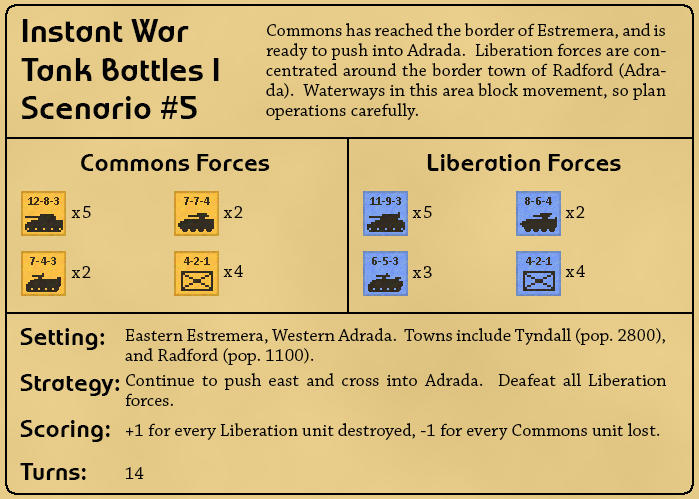
<style>
.page{position:relative;width:699px;height:499px}
.page>*{position:absolute;margin:0}
.t1{font:32px "WorldofWater-Regular";letter-spacing:0.01em;color:#030303}
.t2{font:18px/20px "ChaparralPro-Regular";letter-spacing:0.01em;color:#030303}
.t3{font:24px "WorldofWater-Regular";letter-spacing:0.01em;color:#030303}
.t4{font:18px "ChaparralPro-Regular";letter-spacing:0.1em;color:#030303}
.t5{font:18px "ChaparralPro-Regular";letter-spacing:0.01em;color:#030303}
</style>
<div class="page">
<p class="t1" style="left:21px;top:19px;width:198px;height:100px">Instant War<br>Tank Battles I<br>Scenario #5</p>
<p class="t2" style="left:266px;top:23px;width:400px;height:97px;text-align:justify">Commons has reached the border of Estremera, and is ready to push into Adrada.  Liberation forces are concentrated around the border town of Radford (Adrada).  Waterways in this area block movement, so plan operations carefully.</p>
<p class="t3" style="left:81px;top:154px;width:189px;height:17px">Commons Forces</p>
<p class="t3" style="left:427px;top:154px;width:194px;height:17px">Liberation Forces</p>
<p class="t4" style="left:71px;top:206px;width:20px;height:12px">x5</p>
<p class="t4" style="left:223px;top:206px;width:20px;height:12px">x2</p>
<p class="t4" style="left:412px;top:206px;width:20px;height:12px">x5</p>
<p class="t4" style="left:565px;top:206px;width:20px;height:12px">x2</p>
<p class="t4" style="left:71px;top:266px;width:20px;height:12px">x2</p>
<p class="t4" style="left:223px;top:265px;width:20px;height:12px">x4</p>
<p class="t4" style="left:412px;top:266px;width:20px;height:12px">x3</p>
<p class="t4" style="left:565px;top:265px;width:20px;height:12px">x4</p>
<p class="t3" style="left:20px;top:328px;width:85px;height:22px">Setting:</p>
<p class="t2" style="left:125px;top:328px;width:540px;height:37px;text-align:justify">Eastern Estremera, Western Adrada.  Towns include Tyndall (pop. 2800), and Radford (pop. 1100).</p>
<p class="t3" style="left:20px;top:374px;width:100px;height:22px">Strategy:</p>
<p class="t2" style="left:125px;top:373px;width:542px;height:33px;text-align:justify">Continue to push east and cross into Adrada.  Deafeat all Liberation forces.</p>
<p class="t3" style="left:20px;top:420px;width:90px;height:22px">Scoring:</p>
<p class="t5" style="left:126px;top:423px;width:534px;height:17px">+1 for every Liberation unit destroyed, -1 for every Commons unit lost.</p>
<p class="t3" style="left:20px;top:463px;width:66px;height:17px">Turns:</p>
<p class="t5" style="left:125px;top:467px;width:19px;height:12px">14</p>
</div>
